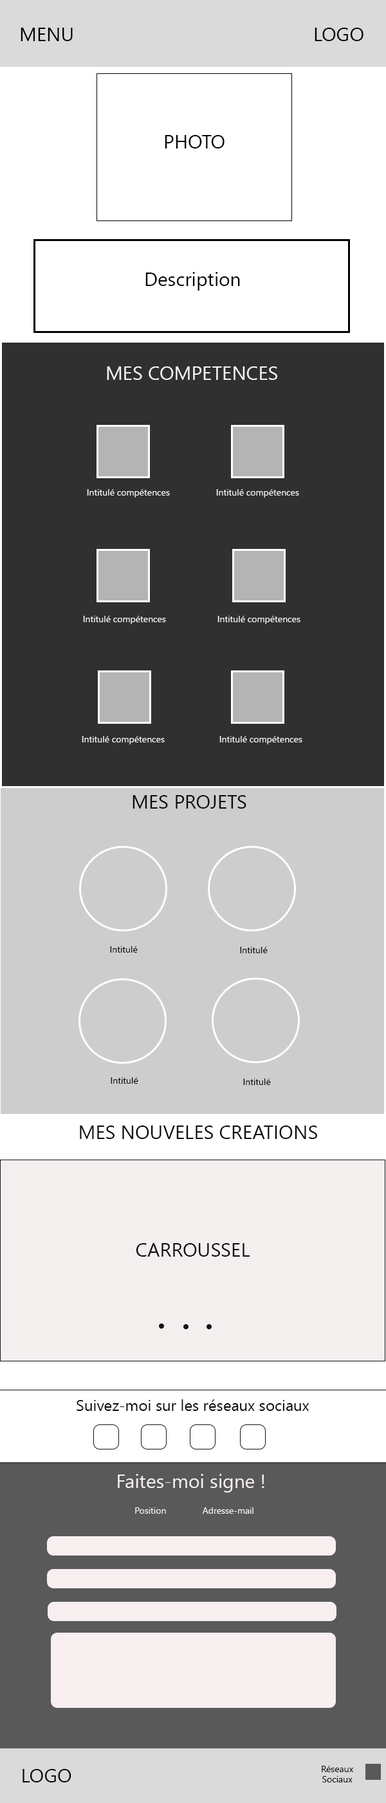
<style>
.page{position:relative;width:386px;height:1803px;background:#ffffff}
.page>*{position:absolute;margin:0}
.t1{font:19.3px "SegoeUI";color:#000000}
.t2{font:19.3px "SegoeUI";color:#f8f3f3}
.t3{font:9px "SegoeUI";color:#f8f3f3}
.t4{font:19.3px "SegoeUI";color:#0a0a0a}
.t5{font:9px "SegoeUI";color:#0a0a0a}
.t6{font:19.3px "SegoeUI";color:#090909}
.t7{font:15.4px "SegoeUI";color:#0a0a0a}
.t8{font:19.3px "SegoeUI";color:#f8f0f0}
.t9{font:9px "SegoeUI";color:#f8f0f0}
.t10{font:9px "SegoeUI";color:#090909}
</style>
<div class="page">
<p class="t1" style="left:21px;top:28px;width:52px;height:13px">MENU</p>
<p class="t1" style="left:314px;top:28px;width:49px;height:13px">LOGO</p>
<p class="t1" style="left:165px;top:135px;width:59px;height:13px">PHOTO</p>
<p class="t1" style="left:145px;top:272px;width:95px;height:19px">Description</p>
<p class="t2" style="left:107px;top:366px;width:170px;height:14px">MES COMPETENCES</p>
<p class="t3" style="left:87px;top:489px;width:83px;height:9px">Intitulé compétences</p>
<p class="t3" style="left:216px;top:489px;width:83px;height:9px">Intitulé compétences</p>
<p class="t3" style="left:83px;top:616px;width:83px;height:8px">Intitulé compétences</p>
<p class="t3" style="left:217px;top:616px;width:83px;height:8px">Intitulé compétences</p>
<p class="t3" style="left:82px;top:736px;width:83px;height:8px">Intitulé compétences</p>
<p class="t3" style="left:219px;top:736px;width:83px;height:8px">Intitulé compétences</p>
<p class="t4" style="left:132px;top:795px;width:114px;height:14px">MES PROJETS</p>
<p class="t5" style="left:110px;top:946px;width:28px;height:7px">Intitulé</p>
<p class="t5" style="left:240px;top:947px;width:27px;height:6px">Intitulé</p>
<p class="t5" style="left:111px;top:1077px;width:27px;height:7px">Intitulé</p>
<p class="t5" style="left:243px;top:1079px;width:28px;height:6px">Intitulé</p>
<p class="t6" style="left:80px;top:1126px;width:237px;height:13px">MES NOUVELES CREATIONS</p>
<p class="t6" style="left:136px;top:1243px;width:114px;height:14px">CARROUSSEL</p>
<p class="t7" style="left:76px;top:1400px;width:233px;height:11px">Suivez-moi sur les réseaux sociaux</p>
<p class="t8" style="left:118px;top:1474px;width:146px;height:19px">Faites-moi signe !</p>
<p class="t9" style="left:135px;top:1508px;width:31px;height:6px">Position</p>
<p class="t9" style="left:202px;top:1508px;width:51px;height:6px">Adresse-mail</p>
<p class="t6" style="left:22px;top:1769px;width:49px;height:14px">LOGO</p>
<p class="t10" style="left:321px;top:1766px;width:32px;height:17px;text-align:center">Réseaux<br>Sociaux</p>
</div>
